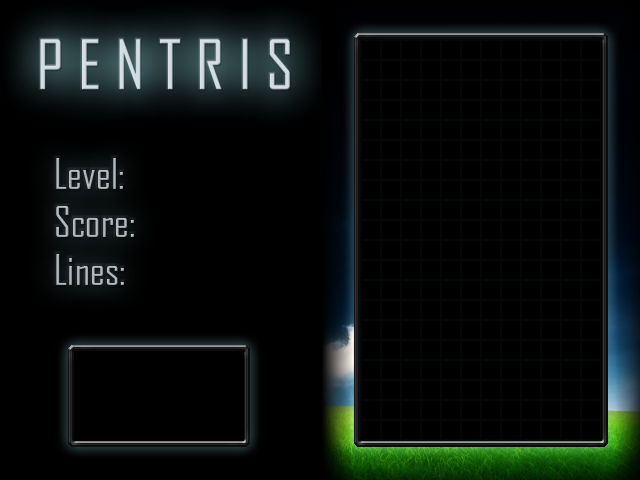
<style>
.page{position:relative;width:640px;height:480px;background:#000000}
.page>*{position:absolute;margin:0}
.t1{font:40px "AgencyFB-Reg";color:#b2bbc0}
</style>
<div class="page">
<p class="t1" style="left:56px;top:158px;width:78px;height:127px">Level:<br>Score:<br>Lines:</p>
</div>
